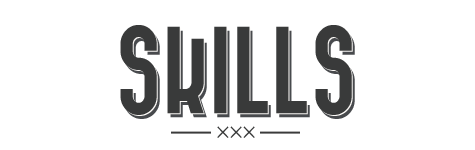
<style>
.page{position:relative;width:475px;height:150px;background:#ffffff}
.page>*{position:absolute;margin:0}
.t1{font:90px "Bazar";color:#393a3a}
.t2{font:90px "Bazar";color:#484a4d}
.t3{font:22px "MyriadPro-Regular";color:#393a3a}
</style>
<div class="page">
<p class="t1" style="left:120px;top:25px;width:232px;height:90px">SKILLS</p>
<p class="t2" style="left:123px;top:29px;width:232px;height:90px">SKILLS</p>
<p class="t3" style="left:217px;top:126px;width:38px;height:12px">×××</p>
</div>
